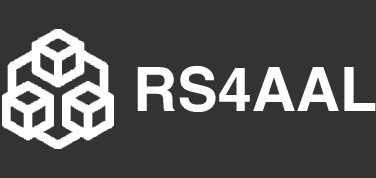
<style>
.page{position:relative;width:376px;height:178px;background:#333333}
.page>*{position:absolute;margin:0}
.t1{font:61px "Helvetica-Bold";color:#ffffff}
</style>
<div class="page">
<p class="t1" style="left:137px;top:65px;width:239px;height:48px">RS4AAL</p>
</div>
